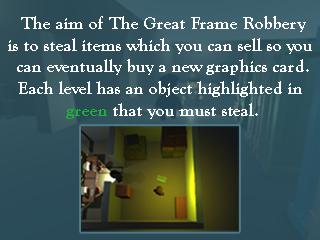
<style>
.page{position:relative;width:320px;height:240px}
.page>*{position:absolute;margin:0}
.t1{font:18px "GoudyOldStyleT-Bold";color:#ffffff}
.t2{font:18px "GoudyOldStyleT-Bold";color:#21ad3e}
</style>
<div class="page">
<p class="t1" style="left:8px;top:16px;width:304px;height:103px;text-align:center">The aim of The Great Frame Robbery<br>is to steal items which you can sell so you <br>can eventually buy a new graphics card.<br>Each level has an object highlighted in <br><span class="t2">green </span>that you must steal.</p>
</div>
